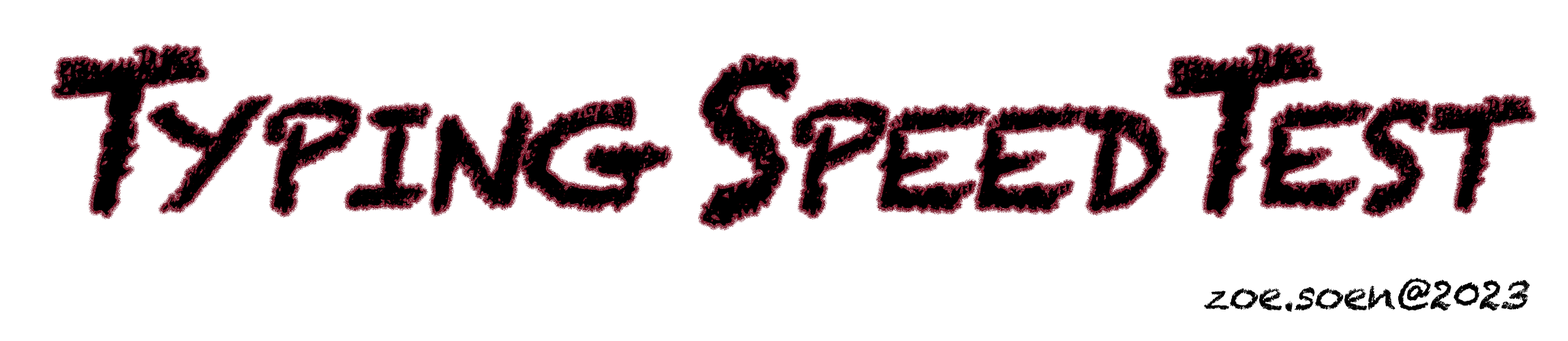
<style>
.page{position:relative;width:1568px;height:341px;background:#ffffff}
.page>*{position:absolute;margin:0}
.t1{font:204.5px "Chalkduster";color:#000000;font-style:italic}
.t2{font:136.3px "Chalkduster";letter-spacing:-0.025em;color:#000000;font-style:italic}
.t3{font:40.9px "Chalkduster";letter-spacing:-0.025em;color:#000000;font-style:italic}
</style>
<div class="page">
<p class="t1" style="left:55px;top:47px;width:150px;height:168px">T</p>
<p class="t1" style="left:1168px;top:46px;width:150px;height:168px">T</p>
<p class="t1" style="left:703px;top:58px;width:93px;height:168px">S</p>
<p class="t2" style="left:151px;top:97px;width:517px;height:116px">YPING</p>
<p class="t2" style="left:794px;top:101px;width:371px;height:114px">PEED</p>
<p class="t2" style="left:1263px;top:98px;width:270px;height:115px">EST</p>
<p class="t3" style="left:1204px;top:277px;width:326px;height:35px">zoe.soen@2023</p>
</div>
